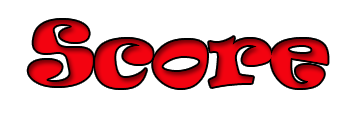
<style>
.page{position:relative;width:360px;height:120px;background:#ffffff}
.page>*{position:absolute;margin:0}
.t1{font:80px "Ravie";color:#e60721}
</style>
<div class="page">
<p class="t1" style="left:28px;top:20px;width:300px;height:68px">Score</p>
</div>
